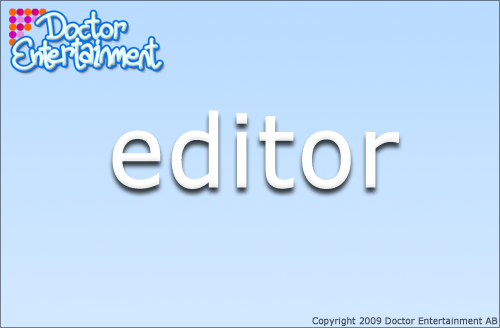
<style>
.page{position:relative;width:500px;height:328px}
.page>*{position:absolute;margin:0}
.t1{font:100px "Verdana";color:#ffffff;font-weight:bold;scale:0.95 1}
.t2{font:9px "Verdana";color:#444b52;font-weight:bold;scale:0.95 1}
</style>
<div class="page">
<p class="t1" style="left:112px;top:110px;width:287px;height:79px">editor</p>
<p class="t2" style="left:312px;top:317px;width:186px;height:9px">Copyright 2009 Doctor Entertainment AB</p>
</div>
